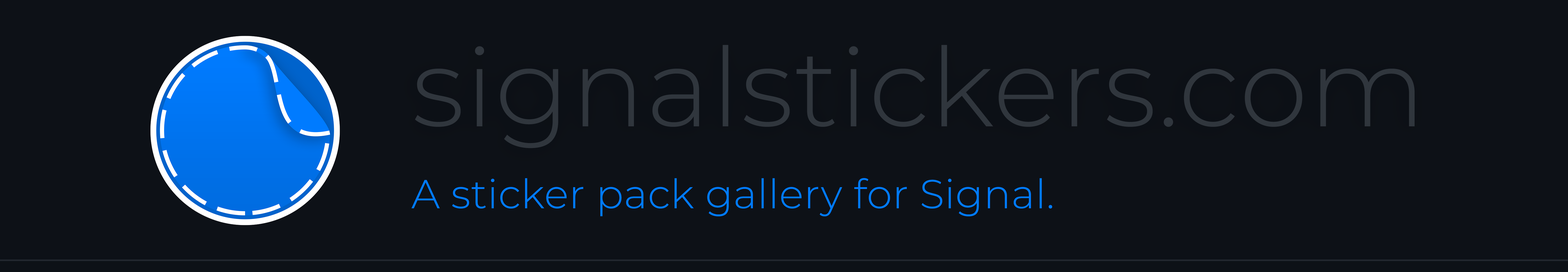
<style>
.page{position:relative;width:1568px;height:272px;background:#0d1117}
.page>*{position:absolute;margin:0}
.t1{font:109.8px "Montserrat-Light";letter-spacing:0.01em;color:#30363d}
.t2{font:40.5px "Montserrat-Light";letter-spacing:0.01em;color:#007bff}
</style>
<div class="page">
<p class="t1" style="left:415px;top:45px;width:1000px;height:103px">signalstickers.com</p>
<p class="t2" style="left:411px;top:178px;width:641px;height:39px">A sticker pack gallery for Signal.</p>
</div>
